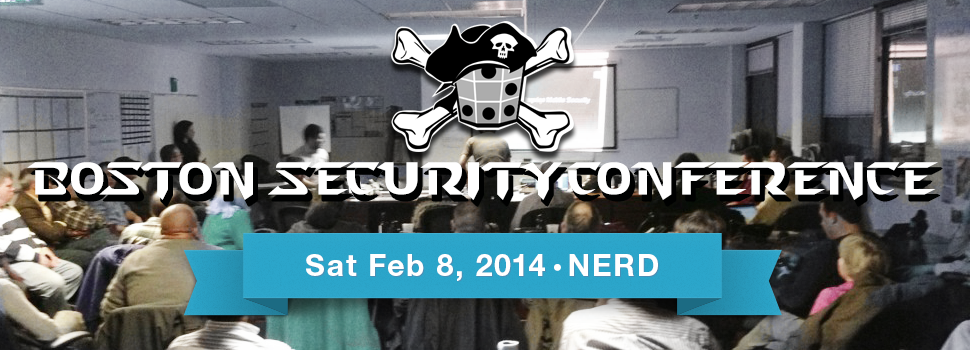
<style>
.page{position:relative;width:970px;height:350px}
.page>*{position:absolute;margin:0}
.t1{font:45.7px "StarcraftNormal";color:#ffffff}
.t2{font:30.5px "HelveticaNeueCE-Bold";letter-spacing:0.05em;color:#ffffff}
.t3{font:42.7px "HelveticaRoundedLT-BoldCond";letter-spacing:0.05em;color:#ffffff}
</style>
<div class="page">
<p class="t1" style="left:27px;top:162px;width:911px;height:38px">Boston SecurityConference</p>
<p class="t2" style="left:306px;top:254px;width:352px;height:27px">Sat Feb 8, 2014  NERD</p>
<p class="t3" style="left:554px;top:264px;width:7px;height:7px">.</p>
</div>
